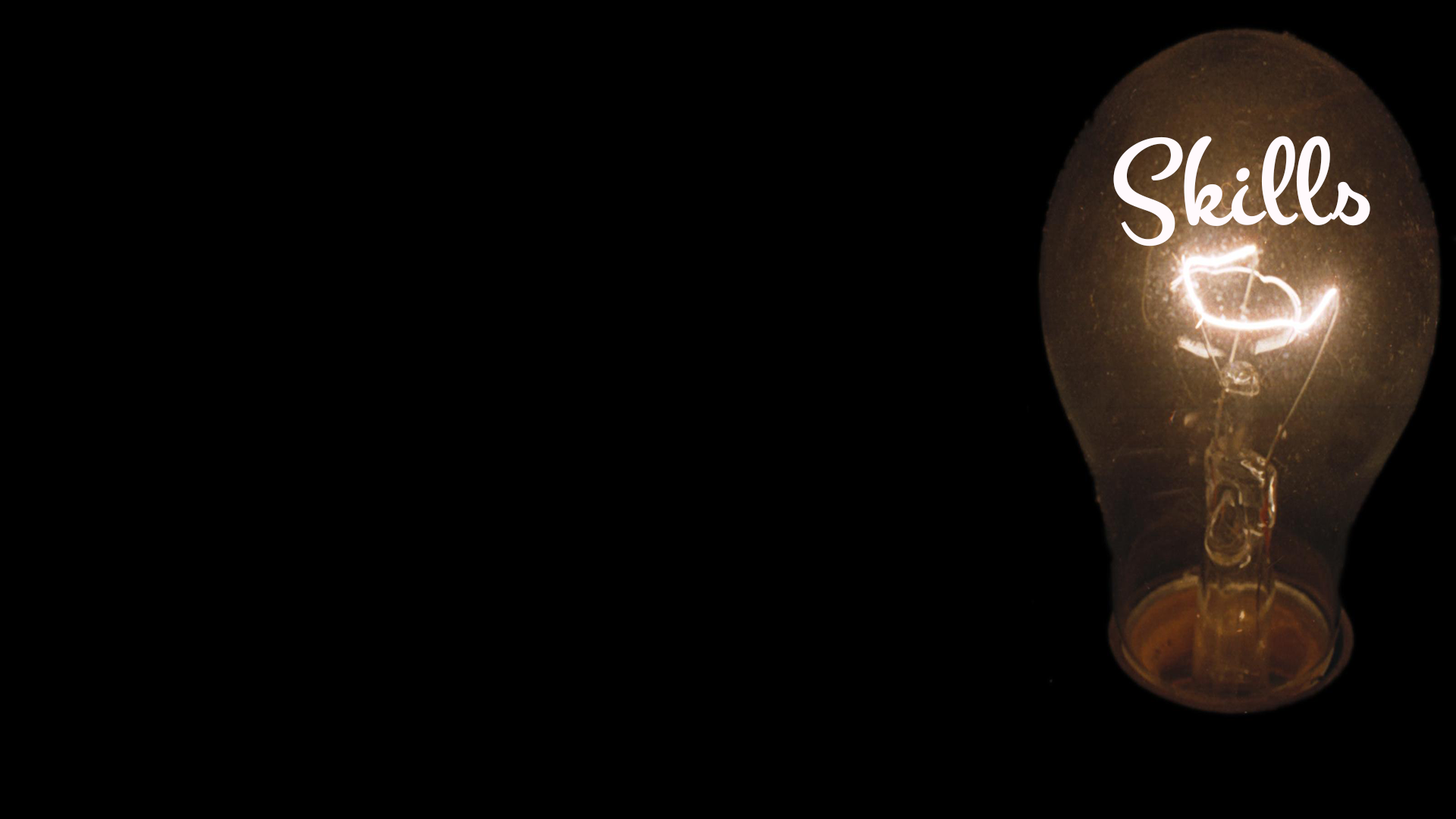
<style>
.page{position:relative;width:1456px;height:819px;background:#000000}
.page>*{position:absolute;margin:0}
.t1{font:122.8px "Montez-Regular";color:#fff9fc;font-weight:bold}
</style>
<div class="page">
<p class="t1" style="left:1113px;top:136px;width:257px;height:110px">Skills</p>
</div>
